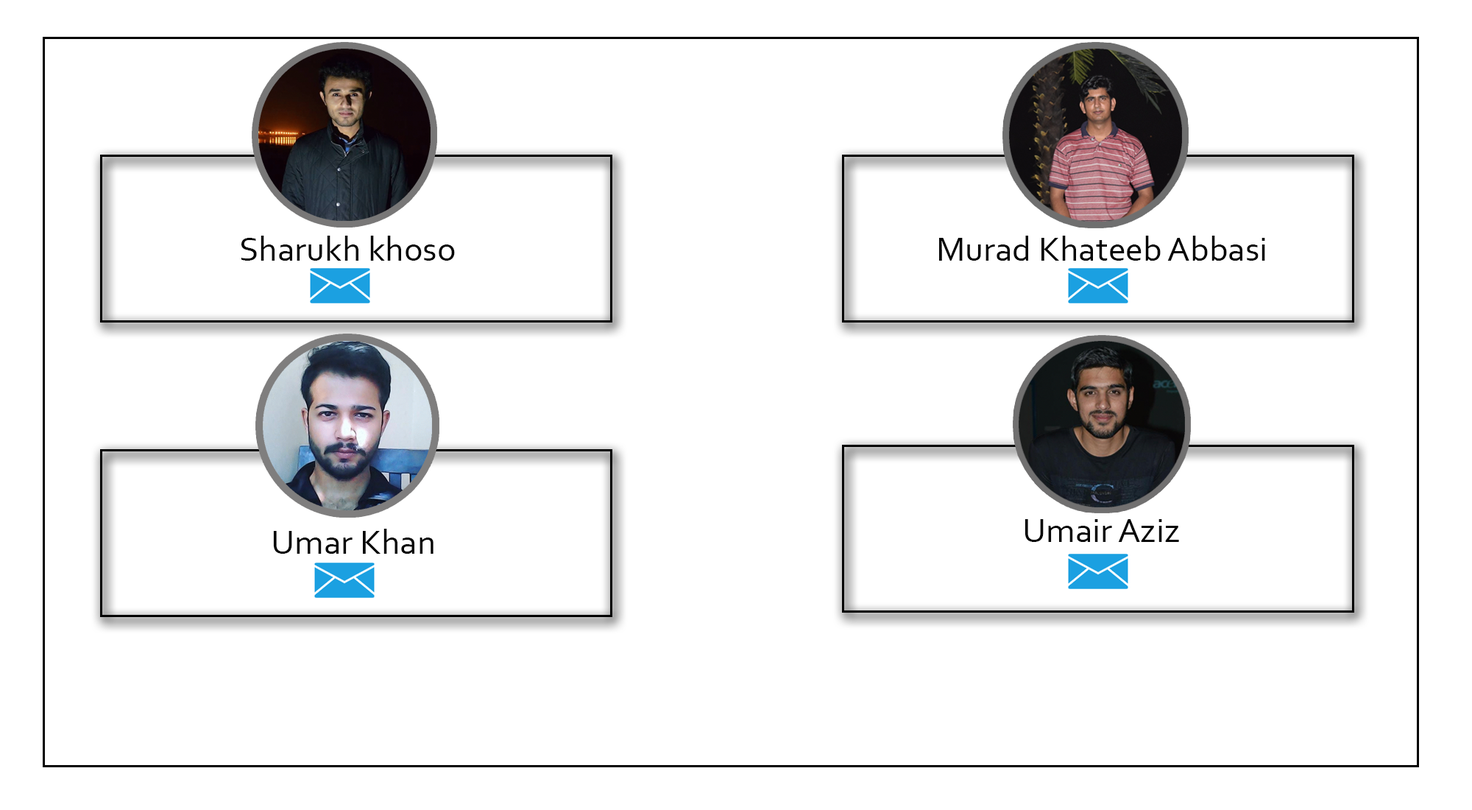
<style>
.page{position:relative;width:1472px;height:810px;background:#ffffff}
.page>*{position:absolute;margin:0}
.t1{font:35.3px "Corbel";color:#040404}
</style>
<div class="page">
<p class="t1" style="left:241px;top:236px;width:214px;height:25px">Sharukh khoso</p>
<p class="t1" style="left:939px;top:236px;width:327px;height:25px">Murad Khateeb Abbasi</p>
<p class="t1" style="left:1025px;top:519px;width:154px;height:23px">Umair Aziz</p>
<p class="t1" style="left:273px;top:529px;width:161px;height:25px">Umar Khan</p>
</div>
